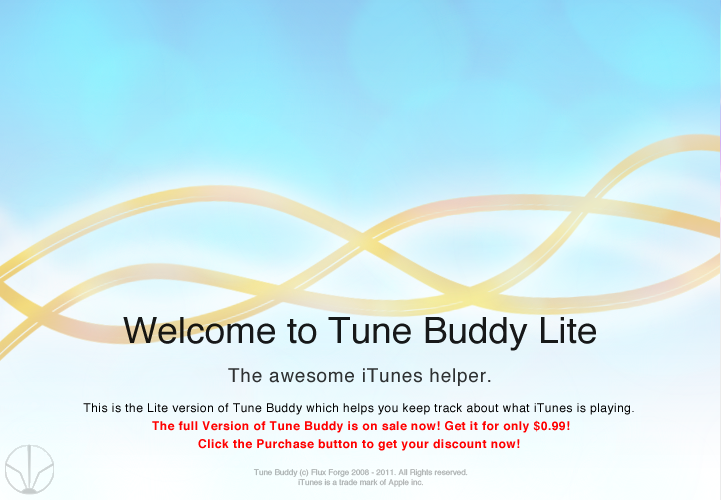
<style>
.page{position:relative;width:721px;height:500px}
.page>*{position:absolute;margin:0}
.t1{font:36px "Helvetica";color:#171819}
.t2{font:19px "Helvetica";letter-spacing:0.04em;color:#2e3233}
.t3{font:12px/18px "Helvetica-Bold";letter-spacing:0.04em;color:#ff0000}
.t4{font:12px/18px "Helvetica";letter-spacing:0.04em;color:#000000}
.t5{font:8px "Helvetica"}
</style>
<div class="page">
<p class="t1" style="left:123px;top:317px;width:473px;height:34px">Welcome to Tune Buddy Lite</p>
<p class="t2" style="left:228px;top:368px;width:263px;height:18px">The awesome iTunes helper.</p>
<p class="t3" style="left:83px;top:403px;width:551px;height:48px;text-align:center"><span class="t4">This is the Lite version of Tune Buddy which helps you keep track about what iTunes is playing. <br></span>The full Version of Tune Buddy is on sale now! Get it for only $0.99!<br>Click the Purchase button to get your discount now!</p>
<p class="t5" style="left:253px;top:469px;width:215px;height:18px;text-align:center">Tune Buddy (c) Flux Forge 2008 - 2011. All Rights reserved.<br>iTunes is a trade mark of Apple inc.</p>
</div>
